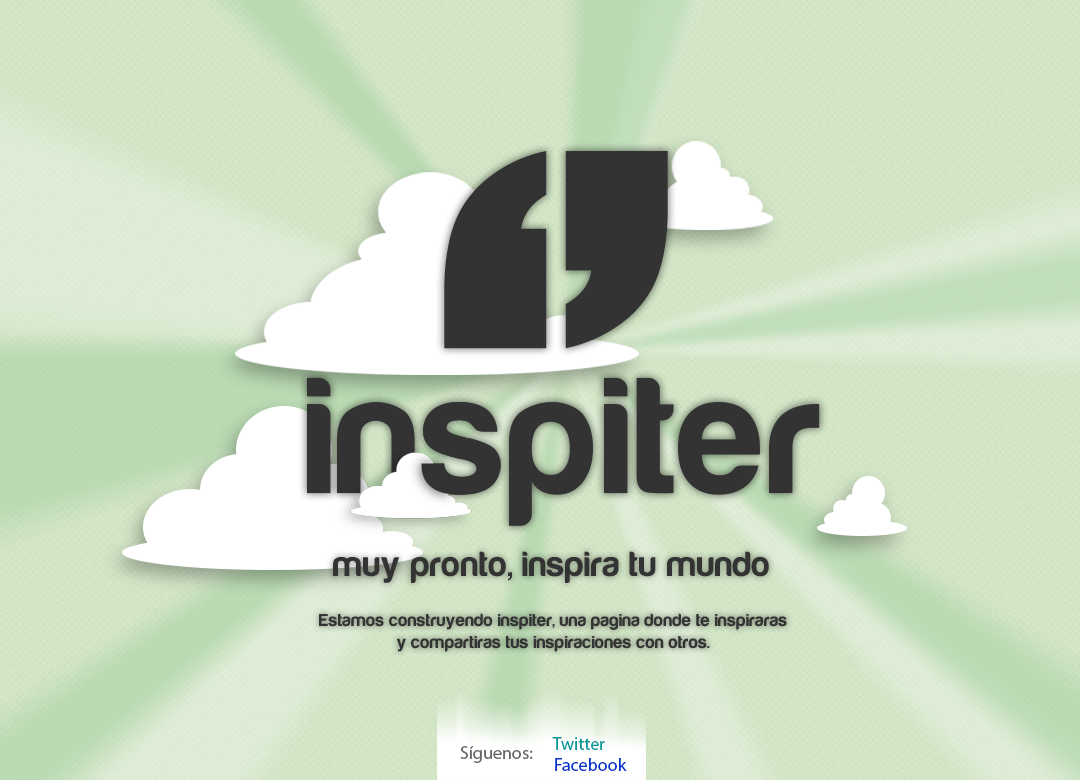
<style>
.page{position:relative;width:1080px;height:780px}
.page>*{position:absolute;margin:0}
.t1{font:769.8px "Impact";letter-spacing:-0.01em;color:#333333}
.t2{font:171.2px "Harabara-Bold";letter-spacing:0.03em;color:#333333}
.t3{font:36px "Harabara-Bold";letter-spacing:0.03em;color:#333333}
.t4{font:18px "Harabara-Bold";letter-spacing:0.03em;color:#333333}
.t5{font:18px "Tahoma";color:#009999}
.t6{font:18px "Tahoma";color:#666666}
.t7{font:18px "Tahoma";color:#0033cc}
</style>
<div class="page">
<p class="t1" style="left:444px;top:151px;width:224px;height:198px">‘’</p>
<p class="t2" style="left:307px;top:377px;width:513px;height:149px">inspiter</p>
<p class="t3" style="left:333px;top:551px;width:436px;height:32px">muy pronto, inspira tu mundo</p>
<p class="t4" style="left:319px;top:613px;width:468px;height:39px;text-align:center">Estamos construyendo inspiter, una pagina donde te inspiraras<br>y compartiras tus inspiraciones con otros.</p>
<p class="t5" style="left:552px;top:737px;width:53px;height:13px">Twitter</p>
<p class="t6" style="left:460px;top:746px;width:73px;height:17px">Síguenos:</p>
<p class="t7" style="left:555px;top:758px;width:72px;height:13px">Facebook</p>
</div>
